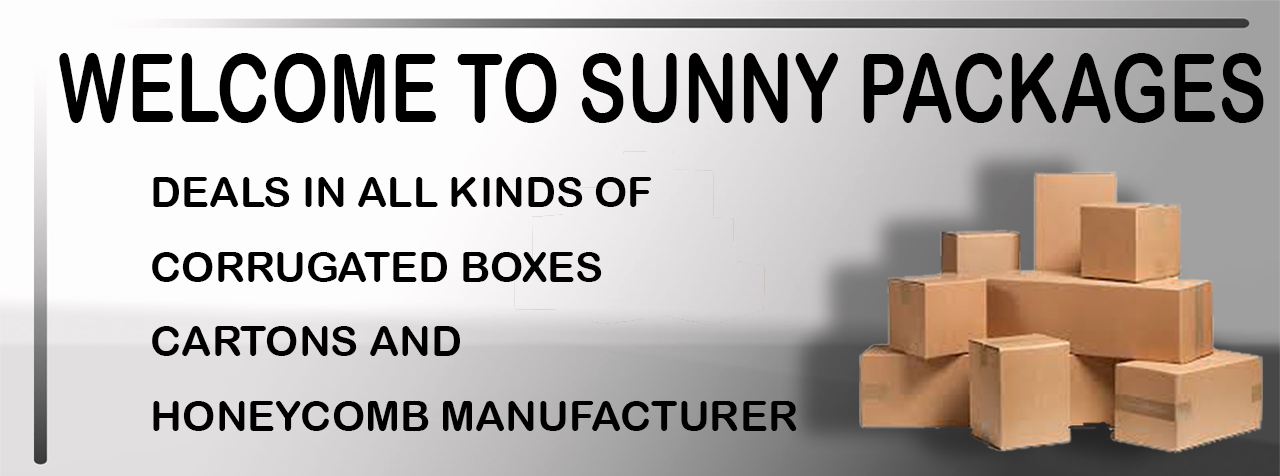
<style>
.page{position:relative;width:1280px;height:476px}
.page>*{position:absolute;margin:0}
.t1{font:94.5px "ArialRoundedMTBold";color:#000000;text-transform:uppercase;scale:0.78 1}
.t2{font:41.9px/74.5px "ArialRoundedMTBold";color:#000000;text-transform:uppercase}
</style>
<div class="page">
<p class="t1" style="left:59px;top:53px;width:1205px;height:70px">WELCOME TO SUNNY PACKAGES</p>
<p class="t2" style="left:152px;top:177px;width:645px;height:254px">Deals In All KIndS Of  <br>Corrugated Boxes <br>Cartons ANd <br>honeycomb manufacturer</p>
</div>
